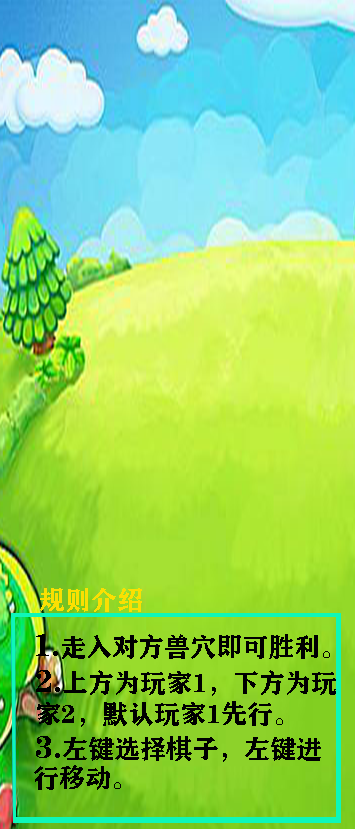
<style>
.page{position:relative;width:355px;height:829px}
.page>*{position:absolute;margin:0}
.t1{font:26px "FZCHSJW--GB1-0";color:#fae002}
.t2{font:26px "FZCHSJW--GB1-0";color:#000000}
.t3{font:32px "FZCHSJW--GB1-0";color:#000000}
</style>
<div class="page">
<p class="t1" style="left:40px;top:588px;width:102px;height:24px">规则介绍</p>
<p class="t2" style="left:36px;top:634px;width:294px;height:25px"><span class="t3">1.</span>走入对方兽穴即可胜利。</p>
<p class="t2" style="left:36px;top:670px;width:300px;height:26px"><span class="t3">2.</span>上方为玩家1，下方为玩</p>
<p class="t2" style="left:37px;top:701px;width:246px;height:26px">家2，默认玩家1先行。</p>
<p class="t2" style="left:36px;top:736px;width:285px;height:26px"><span class="t3">3.</span>左键选择棋子，左键进</p>
<p class="t2" style="left:34px;top:765px;width:87px;height:25px">行移动。</p>
</div>
